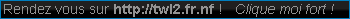
<style>
.page{position:relative;width:350px;height:19px;background:#202020}
.page>*{position:absolute;margin:0}
.t1{font:14px "Arial-ItalicMT";color:#939393}
.t2{font:14px "ArialMT";color:#939393}
.t3{font:14px "Arial-BoldMT";color:#939393}
.t4{font:14px "ArialRoundedMTBold";color:#939393}
</style>
<div class="page">
<p class="t1" style="left:4px;top:4px;width:330px;height:13px"><span class="t2">Rendez vous sur </span><span class="t3">http:</span><span class="t4">//</span><span class="t3">twl2.fr.nf</span><span class="t2"> !   </span>Clique moi fort !</p>
</div>
